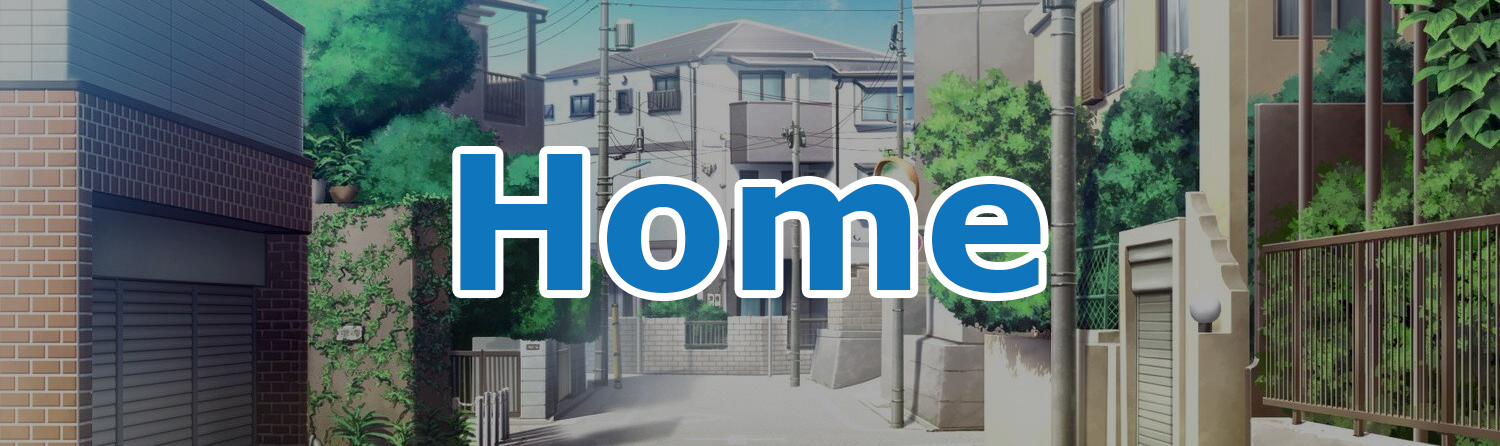
<style>
.page{position:relative;width:1500px;height:446px}
.page>*{position:absolute;margin:0}
.t1{font:186.7px "Verdana-Bold";color:#0f75bc}
</style>
<div class="page">
<p class="t1" style="left:460px;top:154px;width:581px;height:139px">Home</p>
</div>
